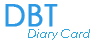
<style>
.page{position:relative;width:93px;height:43px;background:#ffffff}
.page>*{position:absolute;margin:0}
.t1{font:30px "CenturyGothic";color:#2d99e5;font-weight:bold}
.t2{font:12px "CenturyGothic-Italic";color:#2da8e1}
</style>
<div class="page">
<p class="t1" style="left:5px;top:4px;width:53px;height:23px">DBT</p>
<p class="t2" style="left:28px;top:29px;width:62px;height:11px">Diary Card</p>
</div>
